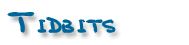
<style>
.page{position:relative;width:189px;height:45px;background:#ffffff}
.page>*{position:absolute;margin:0}
.t1{font:18px "BobbiesHand";color:#006699}
.t2{font:30px "BobbiesHand";color:#006699}
</style>
<div class="page">
<p class="t1" style="left:8px;top:13px;width:107px;height:19px"><span class="t2">T</span>IDBITS</p>
</div>
